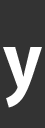
<style>
.page{position:relative;width:45px;height:128px;background:#333333}
.page>*{position:absolute;margin:0}
.t1{font:75px "AdobeGothicStd-Bold";color:#ffffff}
</style>
<div class="page">
<p class="t1" style="left:3px;top:47px;width:39px;height:61px">y</p>
</div>
